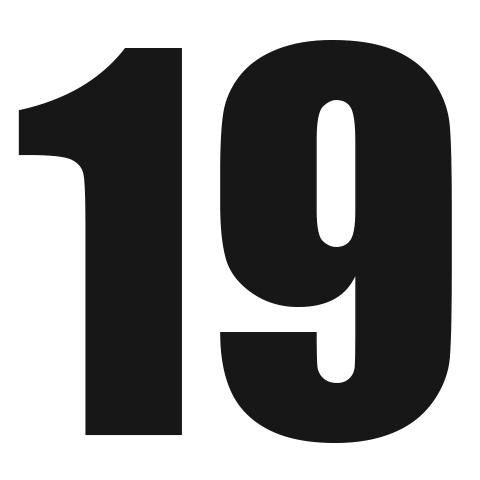
<style>
.page{position:relative;width:480px;height:480px;background:#ffffff}
.page>*{position:absolute;margin:0}
.t1{font:490.3px "Impact";color:#171717}
</style>
<div class="page">
<p class="t1" style="left:18px;top:40px;width:434px;height:403px">19</p>
</div>
